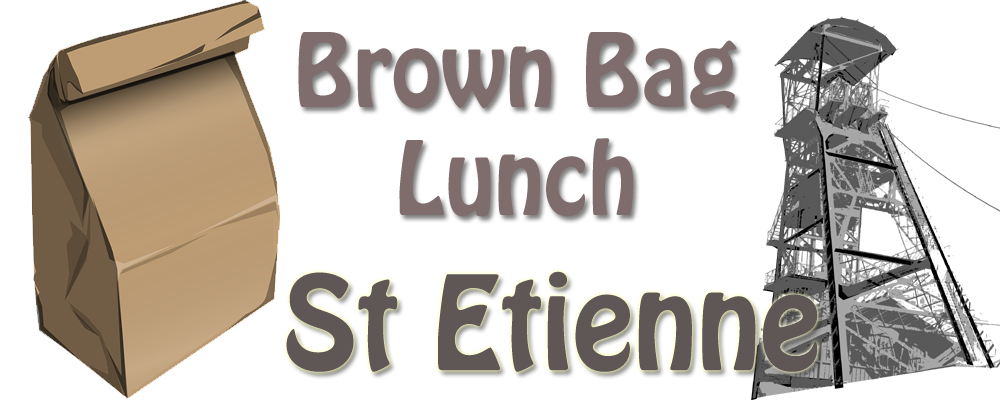
<style>
.page{position:relative;width:1000px;height:400px;background:#ffffff}
.page>*{position:absolute;margin:0}
.t1{font:90px "HoboStd";color:#7f6c6c}
.t2{font:115px "HoboStd";color:#5f5656}
</style>
<div class="page">
<p class="t1" style="left:298px;top:32px;width:439px;height:185px;text-align:center">Brown Bag <br>Lunch</p>
<p class="t2" style="left:286px;top:271px;width:532px;height:101px">St Etienne</p>
</div>
